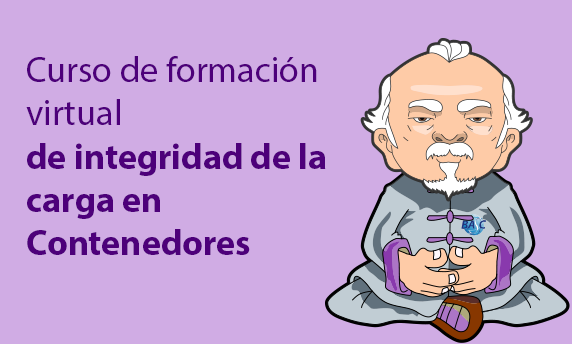
<style>
.page{position:relative;width:572px;height:344px;background:#d0ace4}
.page>*{position:absolute;margin:0}
.t1{font:36px "MyriadPro-Bold";color:#4d007a}
.t2{font:36px "MyriadPro-Regular";color:#4d007a}
</style>
<div class="page">
<p class="t1" style="left:26px;top:56px;width:300px;height:199px"><span class="t2">Curso de formación virtual<br></span>de integridad de la carga en Contenedores</p>
</div>
